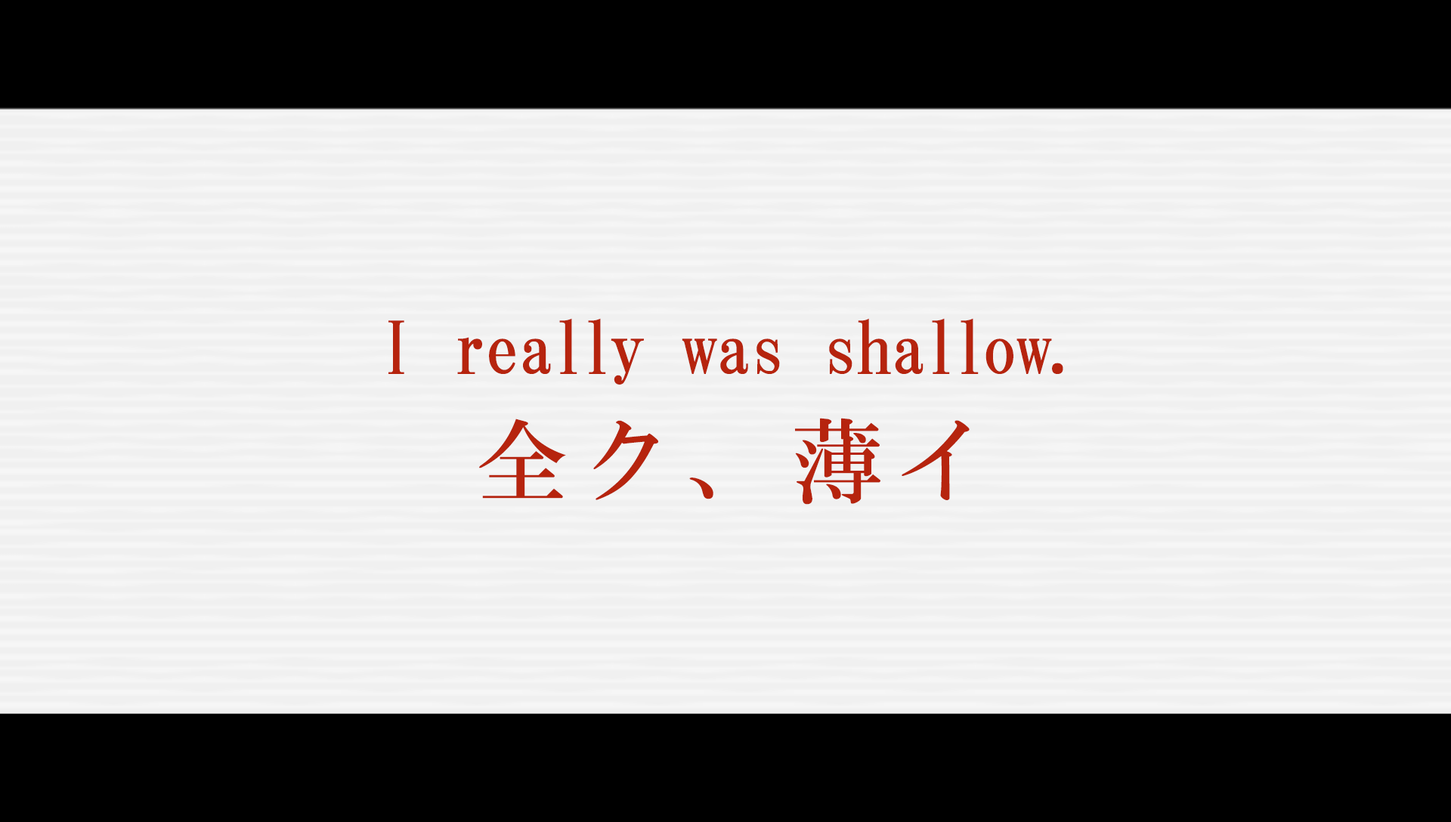
<style>
.page{position:relative;width:1451px;height:822px;background:#f0f0f0}
.page>*{position:absolute;margin:0}
.t1{font:72.5px "HGMinchoB";color:#b6240e}
.t2{font:72.5px "HGMinchoB";letter-spacing:0.025em;color:#b6240e}
.t3{font:91.4px "HGMinchoB";letter-spacing:0.15em;color:#b6240e}
</style>
<div class="page">
<p class="t1" style="left:388px;top:318px;width:675px;height:67px">I really was shallow<span class="t2">.</span></p>
<p class="t3" style="left:479px;top:418px;width:490px;height:87px">全ク、薄イ</p>
</div>
